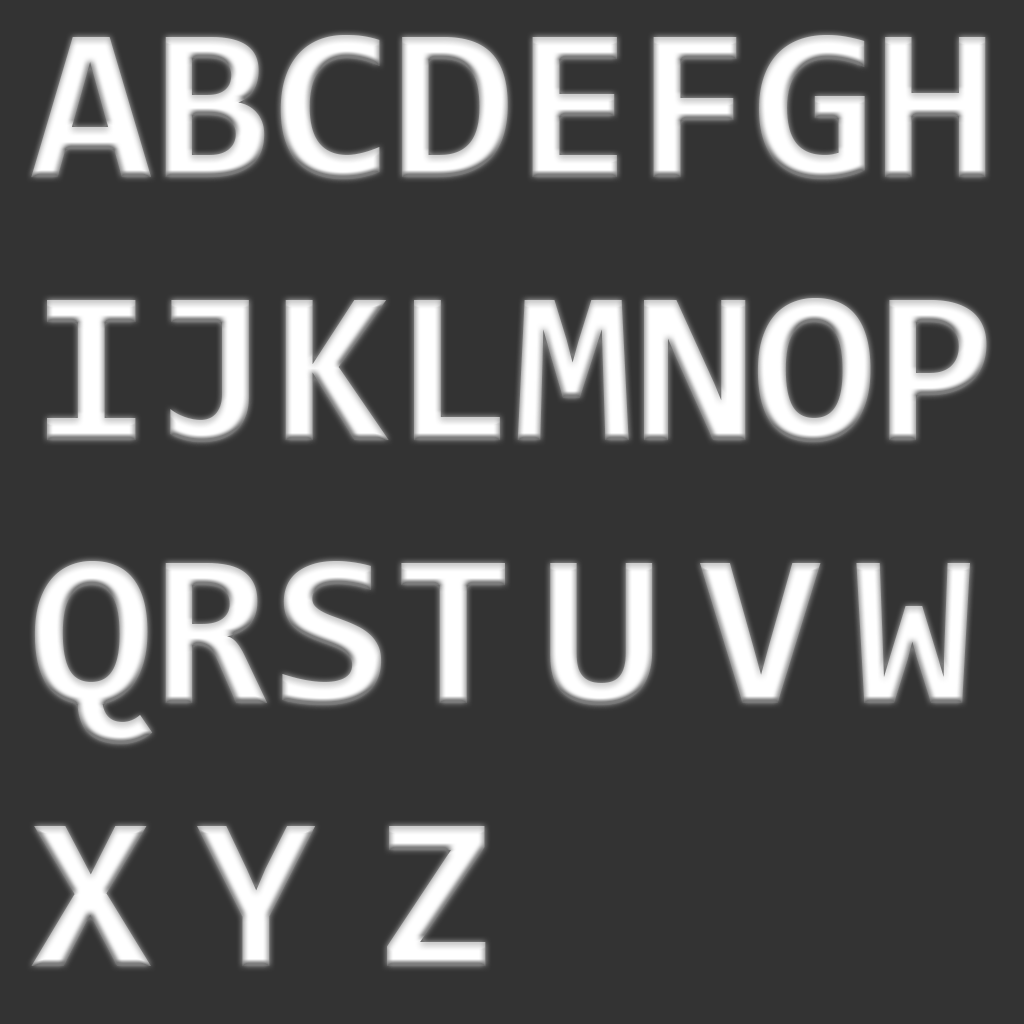
<style>
.page{position:relative;width:1024px;height:1024px;background:#333333}
.page>*{position:absolute;margin:0}
.t1{font:219.1px "Consolas-Bold";color:#ffffff}
</style>
<div class="page">
<p class="t1" style="left:31px;top:35px;width:956px;height:931px">ABCDEFGH<br>IJKLMNOP<br>QRST U V W<br>X Y Z</p>
</div>
